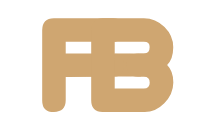
<style>
.page{position:relative;width:218px;height:135px;background:#ffffff}
.page>*{position:absolute;margin:0}
.t1{font:150px "Virgo01";color:#cfa671}
</style>
<div class="page">
<p class="t1" style="left:42px;top:18px;width:83px;height:94px">f</p>
<p class="t1" style="left:91px;top:18px;width:83px;height:94px">B</p>
</div>
